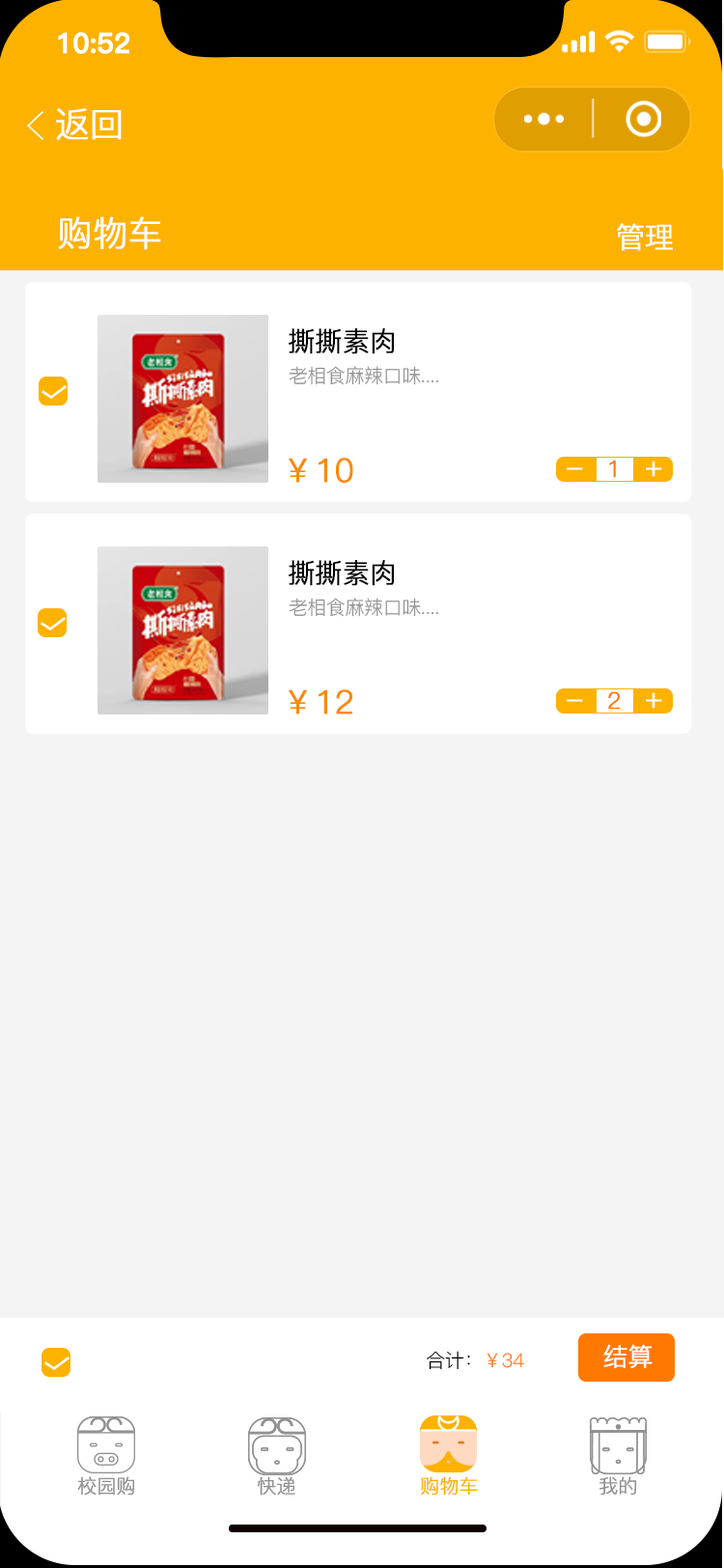
<style>
.page{position:relative;width:724px;height:1568px;background:#f4f4f4}
.page>*{position:absolute;margin:0}
.t1{font:27.5px "PingFang-SC-Bold";letter-spacing:-0.02em;color:#ffffff;font-weight:bold}
.t2{font:34.8px "PingFang-SC-Regular";letter-spacing:-0.02em;color:#ffffff;font-weight:bold}
.t3{font:29px "PingFang-SC-Regular";letter-spacing:-0.02em;color:#ffffff;font-weight:bold}
.t4{font:27px "PingFang-SC-Regular";letter-spacing:-0.02em;color:#000000;font-weight:bold}
.t5{font:19.3px "PingFang-SC-Regular";letter-spacing:-0.02em;color:#919191}
.t6{font:32.8px "PingFang-SC-Regular";letter-spacing:-0.02em;color:#fd8900;font-weight:bold}
.t7{font:23.2px "PingFang-SC-Regular";letter-spacing:-0.02em;color:#ff7900;font-weight:bold}
.t8{font:25.1px "PingFang-SC-Regular";letter-spacing:-0.02em;color:#ffffff;font-weight:bold}
.t9{font:19.3px "PingFang-SC-Regular";letter-spacing:-0.02em;color:#000000}
.t10{font:19.3px "PingFang-SC-Regular";letter-spacing:-0.02em;color:#919191;font-weight:bold}
.t11{font:19.3px "PingFang-SC-Regular";letter-spacing:-0.02em;color:#fdb200;font-weight:bold}
</style>
<div class="page">
<p class="t1" style="left:58px;top:32px;width:71px;height:22px">10:52</p>
<p class="t2" style="left:56px;top:108px;width:66px;height:32px">返回</p>
<p class="t2" style="left:58px;top:216px;width:103px;height:34px">购物车</p>
<p class="t3" style="left:617px;top:223px;width:56px;height:28px">管理</p>
<p class="t4" style="left:289px;top:328px;width:105px;height:26px">撕撕素肉</p>
<p class="t5" style="left:289px;top:366px;width:149px;height:19px">老相食麻辣口味....</p>
<p class="t6" style="left:289px;top:458px;width:64px;height:25px">￥10</p>
<p class="t7" style="left:609px;top:460px;width:7px;height:18px">1</p>
<p class="t3" style="left:646px;top:461px;width:16px;height:16px">+</p>
<p class="t3" style="left:567px;top:467px;width:16px;height:3px">-</p>
<p class="t4" style="left:289px;top:560px;width:105px;height:26px">撕撕素肉</p>
<p class="t5" style="left:289px;top:598px;width:149px;height:19px">老相食麻辣口味....</p>
<p class="t6" style="left:289px;top:689px;width:63px;height:25px">￥12</p>
<p class="t3" style="left:567px;top:699px;width:16px;height:3px">-</p>
<p class="t7" style="left:608px;top:691px;width:12px;height:19px">2</p>
<p class="t3" style="left:646px;top:692px;width:16px;height:17px">+</p>
<p class="t8" style="left:603px;top:1344px;width:50px;height:24px">结算</p>
<p class="t9" style="left:427px;top:1351px;width:97px;height:19px">合计：￥34</p>
<p class="t10" style="left:77px;top:1476px;width:58px;height:20px">校园购</p>
<p class="t10" style="left:257px;top:1476px;width:38px;height:20px">快递</p>
<p class="t11" style="left:421px;top:1476px;width:57px;height:20px">购物车</p>
<p class="t10" style="left:600px;top:1476px;width:37px;height:20px">我的</p>
</div>
